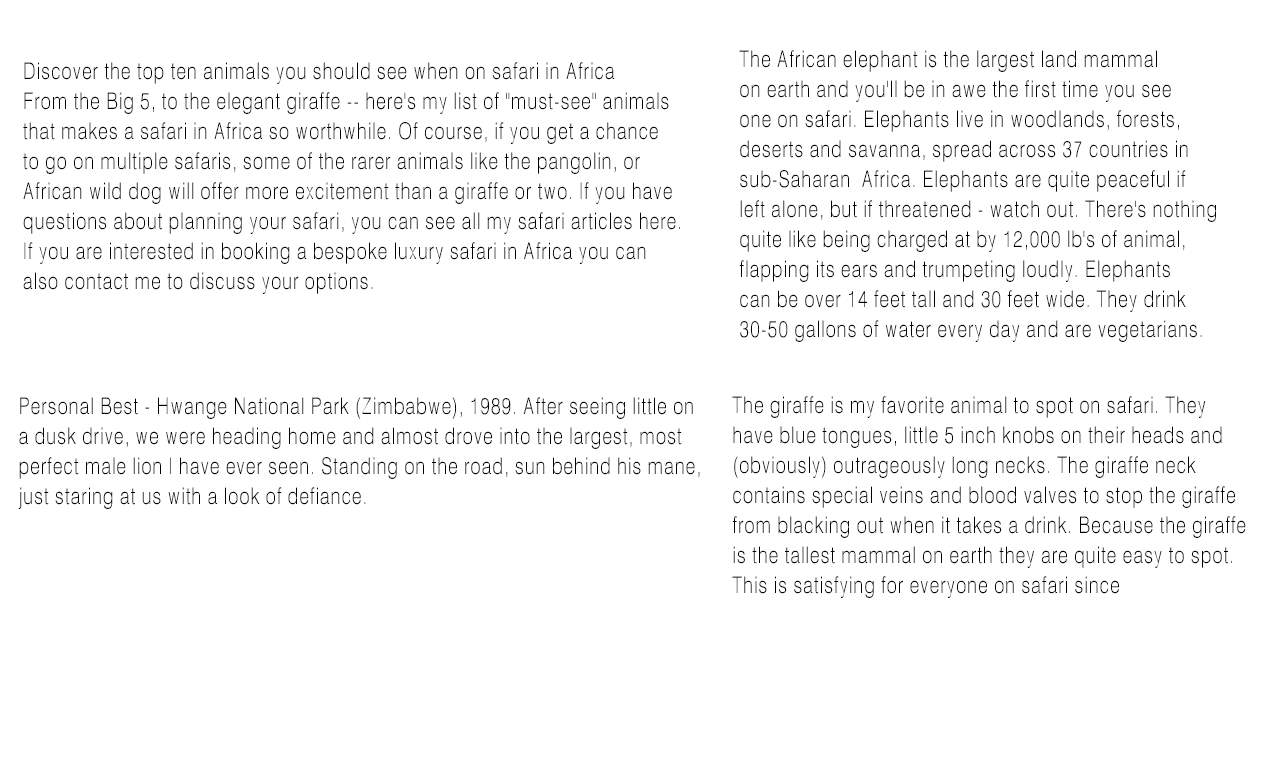
<style>
.page{position:relative;width:1280px;height:768px;background:#ffffff}
.page>*{position:absolute;margin:0}
.t1{font:23px/30px "CATIA-Symbols";letter-spacing:0.025em;color:#000000;scale:0.83 1}
.t2{font:23px/214px "CATIA-Symbols";letter-spacing:0.025em;color:#000000;scale:0.83 1}
</style>
<div class="page">
<p class="t1" style="left:739px;top:50px;width:477px;height:292px">The African elephant is the largest land mammal <br>on earth and you'll be in awe the first time you see<br>one on safari. Elephants live in woodlands, forests,<br>deserts and savanna, spread across 37 countries in <br>sub-Saharan  Africa. Elephants are quite peaceful if<br>left alone, but if threatened - watch out. There's nothing <br>quite like being charged at by 12,000 lb's of animal, <br>flapping its ears and trumpeting loudly. Elephants <br>can be over 14 feet tall and 30 feet wide. They drink <br>30-50 gallons of water every day and are vegetarians.</p>
<p class="t1" style="left:23px;top:62px;width:657px;height:232px"><span class="t2">Discover the top ten animals you should see when on safari in Africa</span><br>From the Big 5, to the elegant giraffe -- here's my list of "must-see" animals <br>that makes a safari in Africa so worthwhile. Of course, if you get a chance <br>to go on multiple safaris, some of the rarer animals like the pangolin, or <br>African wild dog will offer more excitement than a giraffe or two. If you have <br>questions about planning your safari, you can see all my safari articles here. <br>If you are interested in booking a bespoke luxury safari in Africa you can <br>also contact me to discuss your options.</p>
<p class="t1" style="left:18px;top:397px;width:682px;height:112px">Personal Best - Hwange National Park (Zimbabwe), 1989. After seeing little on <br>a dusk drive, we were heading home and almost drove into the largest, most <br>perfect male lion I have ever seen. Standing on the road, sun behind his mane, <br>just staring at us with a look of defiance.</p>
<p class="t1" style="left:732px;top:396px;width:514px;height:202px">The giraffe is my favorite animal to spot on safari. They <br>have blue tongues, little 5 inch knobs on their heads and <br>(obviously) outrageously long necks. The giraffe neck <br>contains special veins and blood valves to stop the giraffe <br>from blacking out when it takes a drink. Because the giraffe <br>is the tallest mammal on earth they are quite easy to spot. <br>This is satisfying for everyone on safari since</p>
</div>
